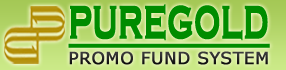
<style>
.page{position:relative;width:286px;height:70px}
.page>*{position:absolute;margin:0}
.t1{font:46px "CopperplateGothic-Bold";letter-spacing:0.005em;color:#008c00;font-weight:bold;text-decoration:underline;scale:0.66 1}
.t2{font:16.7px "MSReferenceSansSerif";letter-spacing:0.005em;color:#282828;font-weight:bold}
</style>
<div class="page">
<p class="t1" style="left:68px;top:4px;width:202px;height:44px">PUREGOLD</p>
<p class="t2" style="left:69px;top:51px;width:199px;height:14px">PROMO FUND SYSTEM</p>
</div>
